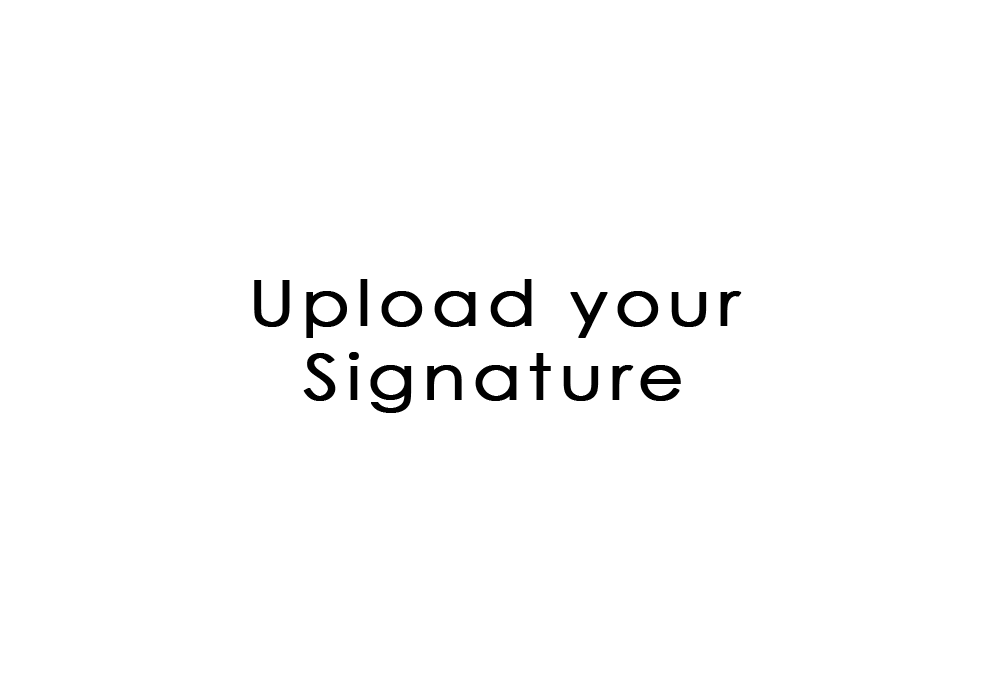
<style>
.page{position:relative;width:1000px;height:700px;background:#ffffff}
.page>*{position:absolute;margin:0}
.t1{font:61.6px/73.6px "CenturyGothic";letter-spacing:0.08em;color:#000000;font-weight:bold;scale:1.14 1}
.t2{font:91.5px/73.6px "CenturyGothic";letter-spacing:0.08em;color:#000000;font-weight:bold;scale:1.14 1}
</style>
<div class="page">
<p class="t1" style="left:254px;top:279px;width:488px;height:134px;text-align:center"><span class="t2"><br><br><br><br></span>Upload your<br>Signature</p>
</div>
